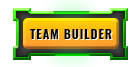
<style>
.page{position:relative;width:140px;height:67px;background:#ffffff}
.page>*{position:absolute;margin:0}
.t1{font:12px "Oswald-Bold";letter-spacing:0.08em;color:#000000;text-transform:uppercase}
</style>
<div class="page">
<p class="t1" style="left:30px;top:29px;width:82px;height:10px">Team Builder</p>
</div>
